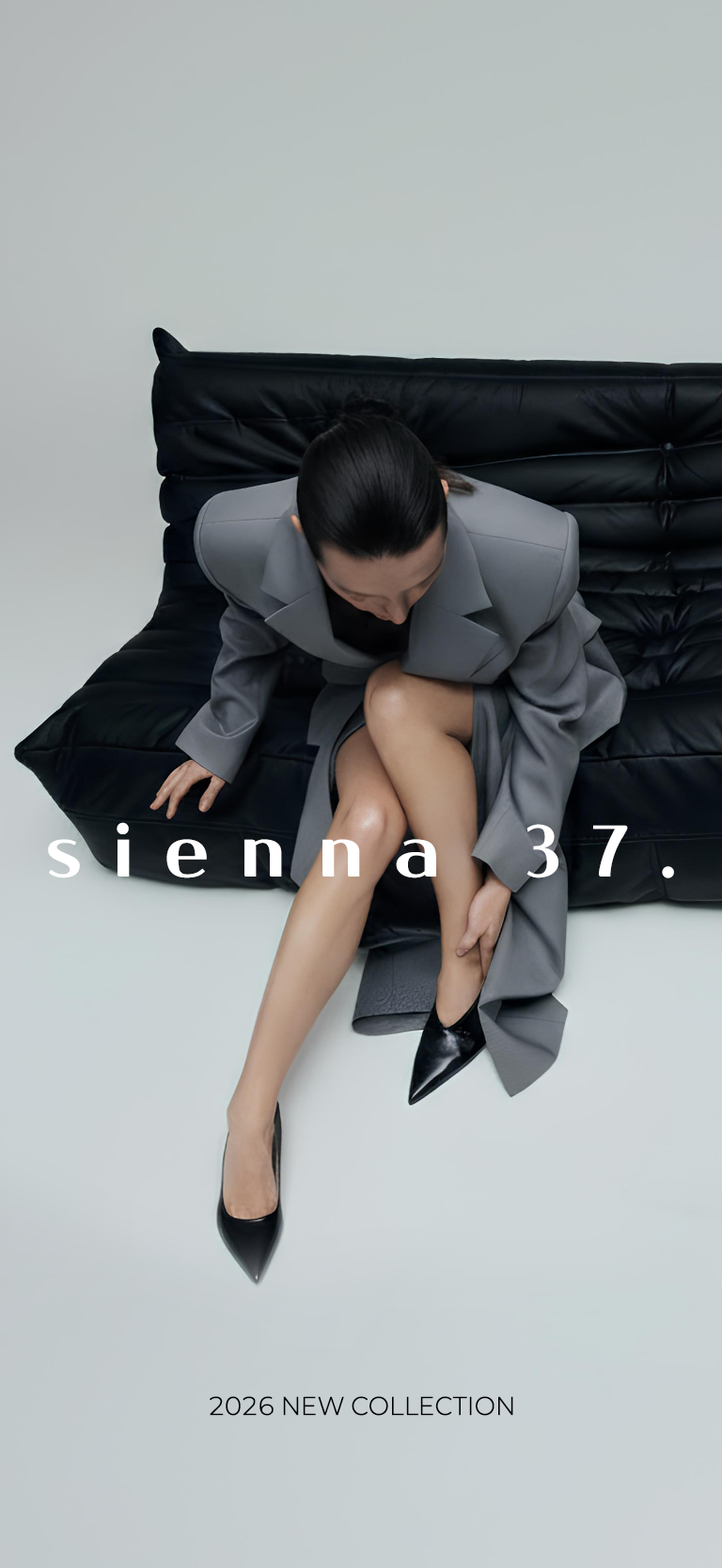
<style>
.page{position:relative;width:722px;height:1568px}
.page>*{position:absolute;margin:0}
.t1{font:70.5px "Cafe24Dangdanghae";letter-spacing:0.45em;color:#ffffff}
.t2{font:23.5px "Paperlogy-3Light";letter-spacing:0.04em;color:#000000}
</style>
<div class="page">
<p class="t1" style="left:48px;top:822px;width:626px;height:56px">sienna 37.</p>
<p class="t2" style="left:210px;top:1396px;width:303px;height:20px">2026 NEW COLLECTION</p>
</div>
